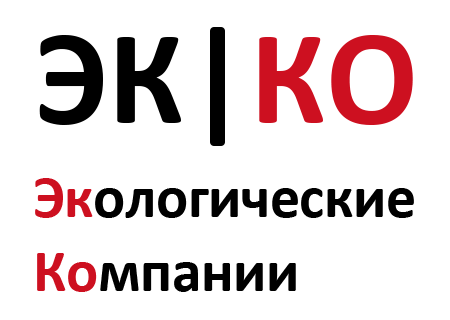
<style>
.page{position:relative;width:450px;height:320px;background:#ffffff}
.page>*{position:absolute;margin:0}
.t1{font:136px "Calibri-Bold";color:#000000}
.t2{font:136px "Calibri-Bold";color:#cd1020}
.t3{font:60px "Calibri-Bold";letter-spacing:-0.01em;color:#000000}
.t4{font:60px "Calibri-Bold";letter-spacing:-0.01em;color:#cd1020}
</style>
<div class="page">
<p class="t1" style="left:39px;top:35px;width:142px;height:90px">ЭК</p>
<p class="t2" style="left:259px;top:35px;width:154px;height:90px">КО</p>
<p class="t3" style="left:35px;top:178px;width:379px;height:40px"><span class="t4">Эк</span>ологические</p>
<p class="t3" style="left:37px;top:253px;width:259px;height:39px"><span class="t4">Ко</span>мпании</p>
</div>
